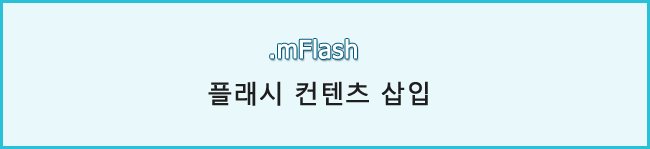
<style>
.page{position:relative;width:650px;height:149px;background:#e9f9fb}
.page>*{position:absolute;margin:0}
.t1{font:25px "Tahoma";color:#ffffff;font-weight:bold}
.t2{font:25px "MalgunGothicRegular";color:#1e1e1e;font-weight:bold}
</style>
<div class="page">
<p class="t1" style="left:270px;top:39px;width:87px;height:20px">.mFlash</p>
<p class="t2" style="left:208px;top:81px;width:220px;height:25px">플래시 컨텐츠 삽입</p>
</div>
